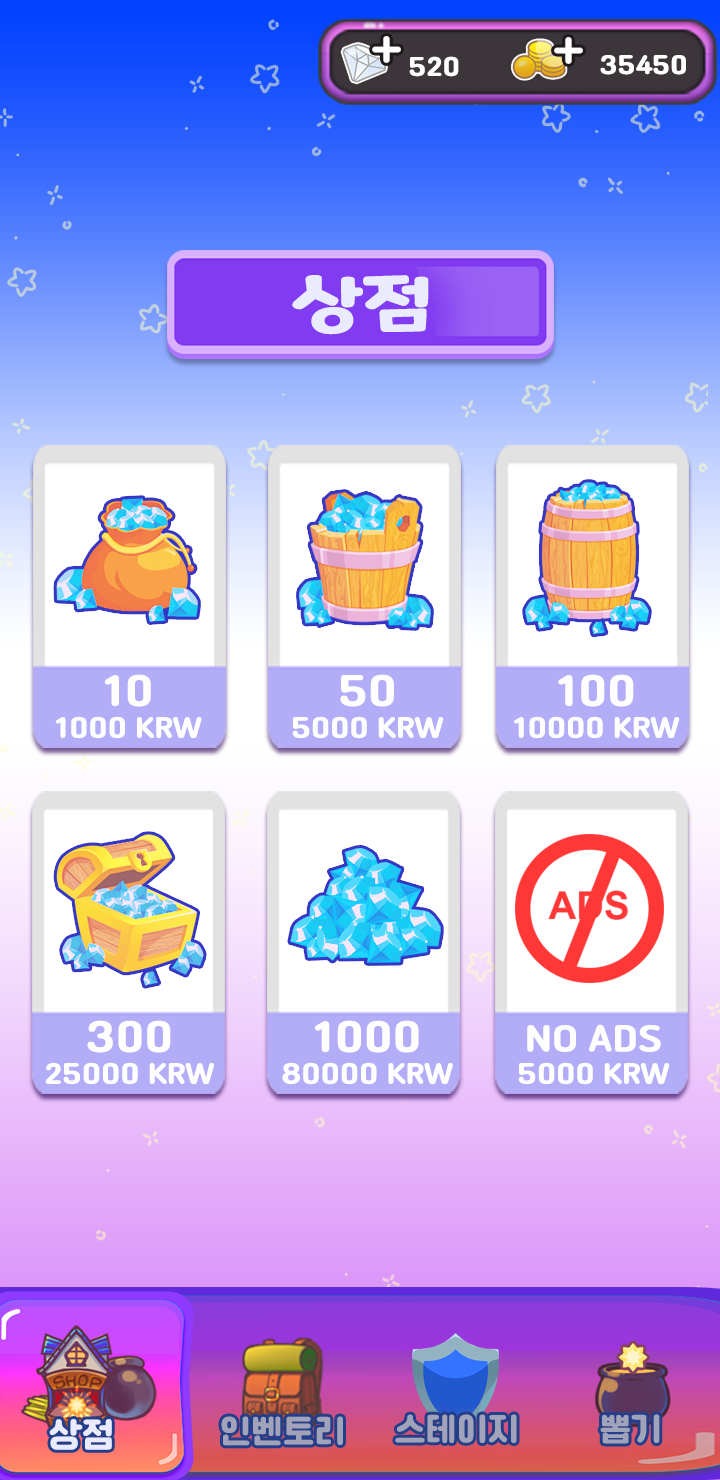
<style>
.page{position:relative;width:720px;height:1480px}
.page>*{position:absolute;margin:0}
.t1{font:25px "Cafe24Ssurround";color:#fefefe}
.t2{font:62.1px "MaplestoryBold";color:#eaebff;scale:1.3 1}
.t3{font:27.4px "Cafe24Ssurround";color:#fefefe}
.t4{font:41px "Cafe24Ssurround";color:#fefefe}
.t5{font:35px "Cafe24Ssurround";color:#fefefe}
.t6{font:35px "Cafe24Ssurround";color:#eaebff}
.t7{font:33px "Cafe24Ssurround";color:#a1a3bb}
</style>
<div class="page">
<p class="t1" style="left:409px;top:56px;width:50px;height:21px">520</p>
<p class="t1" style="left:600px;top:55px;width:86px;height:20px">35450</p>
<p class="t2" style="left:292px;top:275px;width:137px;height:60px">상점</p>
<p class="t3" style="left:55px;top:674px;width:147px;height:65px;text-align:center"><span class="t4">10<br></span>1000 KRW</p>
<p class="t3" style="left:292px;top:674px;width:152px;height:65px;text-align:center"><span class="t4">50<br></span>5000 KRW</p>
<p class="t3" style="left:514px;top:674px;width:166px;height:65px;text-align:center"><span class="t4">100<br></span>10000 KRW</p>
<p class="t3" style="left:45px;top:1020px;width:170px;height:65px;text-align:center"><span class="t4">300<br></span>25000 KRW</p>
<p class="t3" style="left:282px;top:1020px;width:171px;height:65px;text-align:center"><span class="t4">1000<br></span>80000 KRW</p>
<p class="t3" style="left:518px;top:1024px;width:152px;height:61px;text-align:center"><span class="t5">NO ADS<br></span>5000 KRW</p>
<p class="t6" style="left:49px;top:1419px;width:63px;height:31px">상점</p>
<p class="t7" style="left:221px;top:1416px;width:122px;height:30px">인벤토리</p>
<p class="t7" style="left:395px;top:1414px;width:122px;height:29px">스테이지</p>
<p class="t7" style="left:600px;top:1414px;width:60px;height:30px">뽑기</p>
</div>
